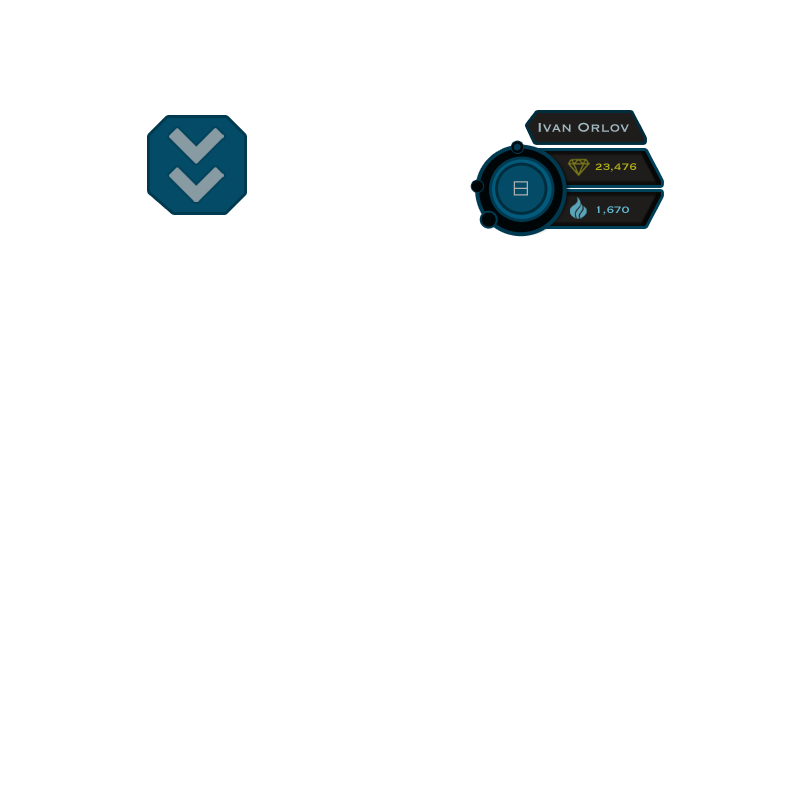
<style>
.page{position:relative;width:800px;height:800px;background:#ffffff}
.page>*{position:absolute;margin:0}
.t1{font:16.7px "Copperplate";color:#bababa}
.t2{font:12.5px "Copperplate";color:#b0ae18}
.t3{font:41.7px "AuricomRegular";color:#afafaf}
.t4{font:12.5px "Copperplate";color:#61b8d1}
</style>
<div class="page">
<p class="t1" style="left:538px;top:122px;width:91px;height:10px">Ivan Orlov</p>
<p class="t2" style="left:595px;top:163px;width:42px;height:9px">23,476</p>
<p class="t3" style="left:513px;top:181px;width:15px;height:15px">8</p>
<p class="t4" style="left:597px;top:206px;width:32px;height:9px">1,670</p>
</div>
